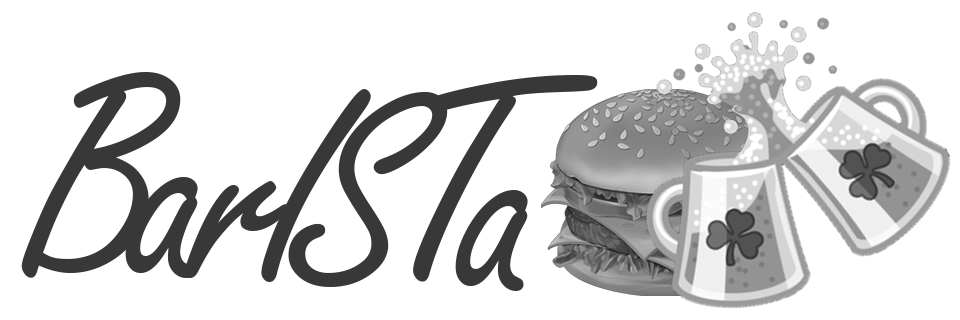
<style>
.page{position:relative;width:960px;height:320px;background:#ffffff}
.page>*{position:absolute;margin:0}
.t1{font:300px "FreestyleScript-Regular";color:#383838}
</style>
<div class="page">
<p class="t1" style="left:21px;top:72px;width:160px;height:206px">B</p>
<p class="t1" style="left:413px;top:75px;width:185px;height:207px">T</p>
<p class="t1" style="left:261px;top:89px;width:110px;height:193px">I</p>
<p class="t1" style="left:288px;top:92px;width:160px;height:195px">S</p>
<p class="t1" style="left:125px;top:177px;width:73px;height:101px">a</p>
<p class="t1" style="left:184px;top:181px;width:106px;height:97px">r</p>
<p class="t1" style="left:455px;top:190px;width:73px;height:101px">a</p>
</div>
